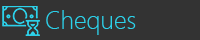
<style>
.page{position:relative;width:200px;height:40px;background:#333333}
.page>*{position:absolute;margin:0}
.t1{font:25px "SegoeUI-Light";color:#2cd1ea}
</style>
<div class="page">
<p class="t1" style="left:46px;top:10px;width:90px;height:25px">Cheques</p>
</div>
